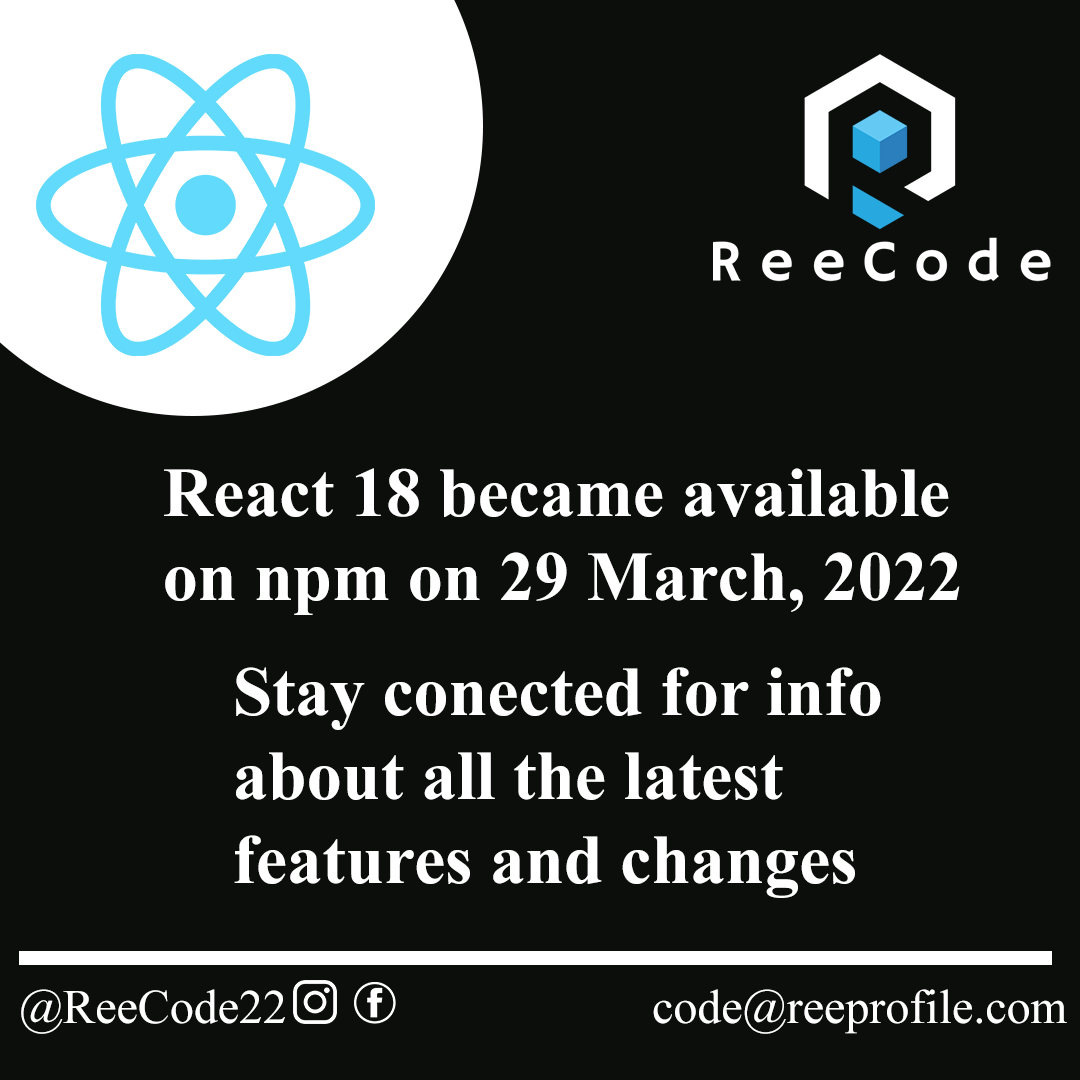
<style>
.page{position:relative;width:1080px;height:1080px;background:#0c0e0c}
.page>*{position:absolute;margin:0}
.t1{font:70px "TimesNewRomanPS-BoldMT";color:#ffffff}
.t2{font:48px "TimesNewRomanPSMT";color:#ffffff}
</style>
<div class="page">
<p class="t1" style="left:164px;top:468px;width:796px;height:147px">React 18 became available<br>on npm on 29 March, 2022</p>
<p class="t1" style="left:234px;top:667px;width:647px;height:231px">Stay conected for info<br>about all the latest<br>features and changes</p>
<p class="t2" style="left:21px;top:989px;width:264px;height:45px">@ReeCode22</p>
<p class="t2" style="left:653px;top:989px;width:414px;height:45px">code@reeprofile.com</p>
</div>
